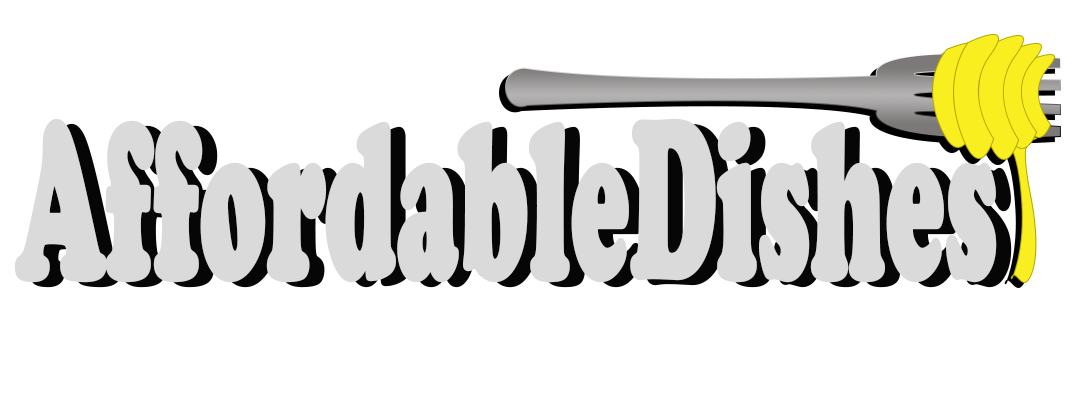
<style>
.page{position:relative;width:1080px;height:400px;background:#ffffff}
.page>*{position:absolute;margin:0}
.t1{font:230px "CooperBlack";color:#dadada;font-weight:bold;scale:0.46 1}
.t2{font:230px "CooperBlack";font-weight:bold;scale:0.46 1}
</style>
<div class="page">
<p class="t1" style="left:14px;top:118px;width:983px;height:165px">AffordableDishes</p>
<p class="t2" style="left:29px;top:123px;width:983px;height:165px">AffordableDishes</p>
</div>
